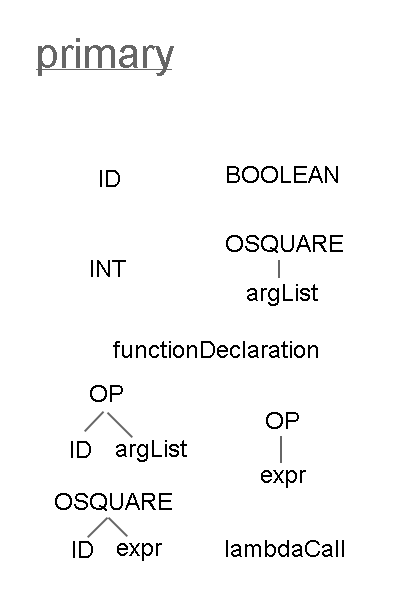
<style>
.page{position:relative;width:396px;height:612px;background:#ffffff}
.page>*{position:absolute;margin:0}
.t1{font:42px "ArialMT";color:#666666}
.t2{font:12px "ArialMT";color:#000000}
</style>
<div class="page">
<p class="t1" style="left:38px;top:38px;width:136px;height:38px">primary</p>
<p class="t2" style="left:100px;top:170px;width:20px;height:17px">ID</p>
<p class="t2" style="left:227px;top:166px;width:111px;height:17px">BOOLEAN</p>
<p class="t2" style="left:226px;top:235px;width:117px;height:18px">OSQUARE</p>
<p class="t2" style="left:91px;top:260px;width:35px;height:17px">INT</p>
<p class="t2" style="left:247px;top:284px;width:71px;height:22px">argList</p>
<p class="t2" style="left:113px;top:341px;width:205px;height:17px">functionDeclaration</p>
<p class="t2" style="left:90px;top:385px;width:33px;height:17px">OP</p>
<p class="t2" style="left:266px;top:412px;width:33px;height:17px">OP</p>
<p class="t2" style="left:71px;top:441px;width:20px;height:17px">ID</p>
<p class="t2" style="left:116px;top:440px;width:71px;height:22px">argList</p>
<p class="t2" style="left:261px;top:470px;width:45px;height:18px">expr</p>
<p class="t2" style="left:55px;top:493px;width:117px;height:18px">OSQUARE</p>
<p class="t2" style="left:73px;top:541px;width:20px;height:17px">ID</p>
<p class="t2" style="left:117px;top:543px;width:45px;height:18px">expr</p>
<p class="t2" style="left:226px;top:540px;width:118px;height:17px">lambdaCall</p>
</div>
